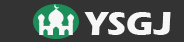
<style>
.page{position:relative;width:184px;height:42px;background:#333333}
.page>*{position:absolute;margin:0}
.t1{font:35px "ErasITC-Bold";color:#f6f6f7}
</style>
<div class="page">
<p class="t1" style="left:84px;top:12px;width:87px;height:23px">YSGJ</p>
</div>
